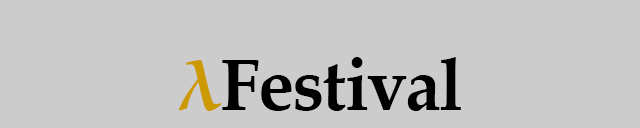
<style>
.page{position:relative;width:640px;height:128px;background:#cccccc}
.page>*{position:absolute;margin:0}
.t1{font:72px "Palatino-Bold";letter-spacing:-0.025em;color:#000000}
.t2{font:72px "Palatino-Bold";letter-spacing:-0.025em;color:#cc9900}
</style>
<div class="page">
<p class="t1" style="left:178px;top:57px;width:283px;height:54px"><span class="t2">λ</span>Festival</p>
</div>
